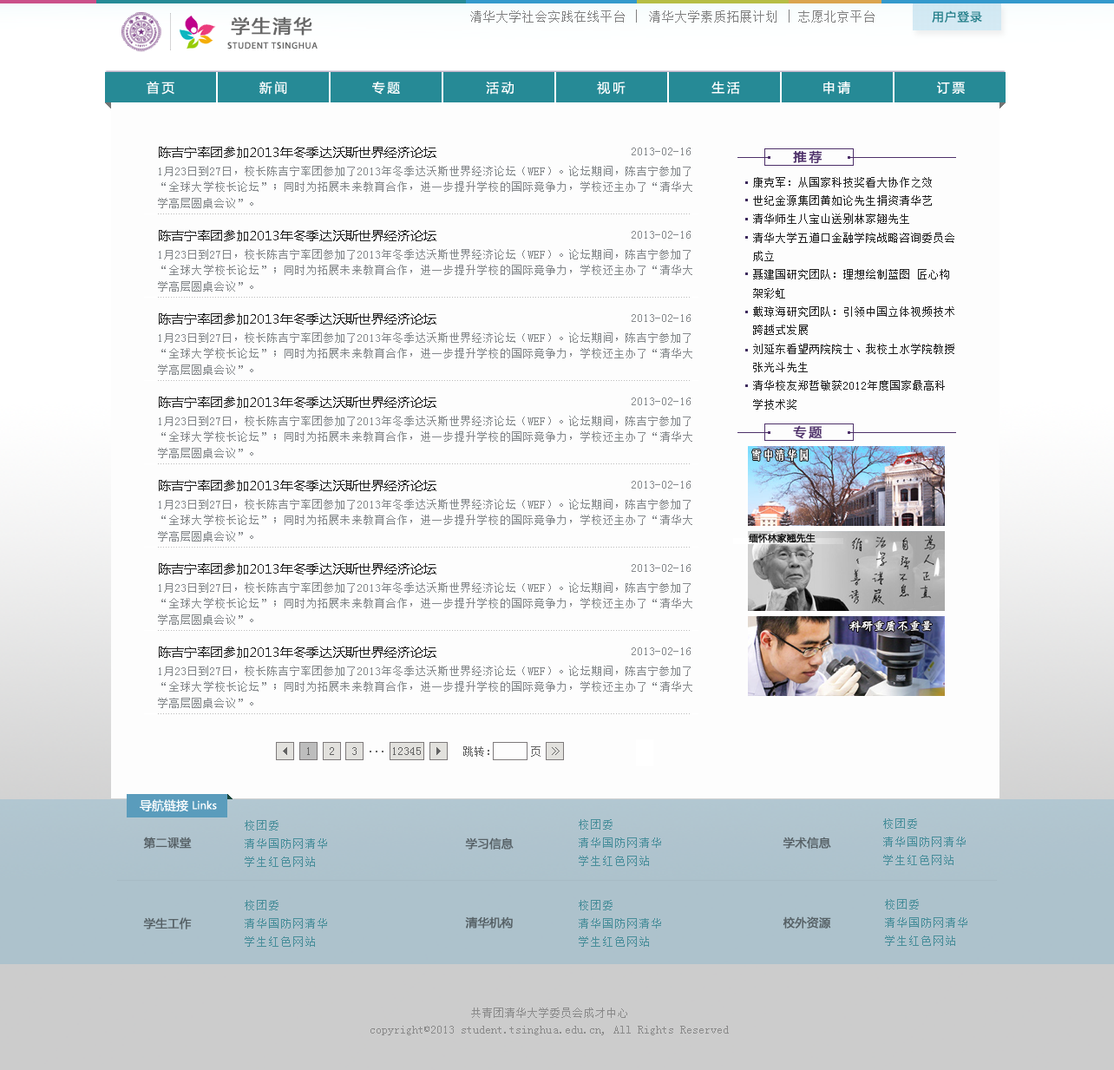
<style>
.page{position:relative;width:1114px;height:1070px;background:#fdfdfd}
.page>*{position:absolute;margin:0}
.t1{font:18.5px "MicrosoftYaHei";letter-spacing:0.1em;color:#666666;font-weight:bold}
.t2{font:12.2px "SimSun";letter-spacing:0.075em;color:#808080}
.t3{font:12.7px "SimSun";letter-spacing:0.075em;color:#808080}
.t4{font:11.6px "MicrosoftYaHei";letter-spacing:0.1em;color:#237e89}
.t5{font:9.3px "MyriadPro-Regular";letter-spacing:0.075em;color:#666666}
.t6{font:12.7px "MicrosoftYaHei";letter-spacing:0.2em;color:#ffffff}
.t7{font:12.7px "MicrosoftYaHei";color:#212121}
.t8{font:11.6px "SimSun";color:#84888b}
.t9{font:12.7px "MicrosoftYaHei";letter-spacing:0.2em;color:#4d3069;font-weight:bold}
.t10{font:11.6px/16.2px "SimSun";color:#84888b}
.t11{font:11.6px/18.5px "SimSun";color:#202020}
.t12{font:11.6px "FZYTK--GBK1-0";color:#ffffff;font-weight:bold}
.t13{font:9.3px "MicrosoftYaHei";color:#000000;font-weight:bold}
.t14{font:11.6px "STKaiti";color:#ffffff;font-weight:bold}
.t15{font:11.6px "SimSun";color:#636363}
.t16{font:10.4px "MicrosoftYaHei";color:#ffffff}
.t17{font:12.2px "MicrosoftYaHei";color:#ffffff}
.t18{font:11.6px/18.5px "SimSun";letter-spacing:0.075em;color:#478d9a}
.t19{font:11.6px "MicrosoftYaHei";color:#576167;font-weight:bold}
.t20{font:11.6px/18.5px "SimSun";letter-spacing:0.075em;color:#478d99}
.t21{font:11.6px "MicrosoftYaHei";color:#566166;font-weight:bold}
.t22{font:11.6px/16.2px "SimSun";color:#8a8a8a}
</style>
<div class="page">
<p class="t1" style="left:231px;top:16px;width:81px;height:20px">学生清华</p>
<p class="t2" style="left:470px;top:10px;width:405px;height:13px">清华大学社会实践在线平台 <span class="t3">| </span>清华大学素质拓展计划 <span class="t3">| </span>志愿北京平台</p>
<p class="t4" style="left:932px;top:10px;width:50px;height:13px">用户登录</p>
<p class="t5" style="left:227px;top:42px;width:91px;height:7px">STUDENT TSINGHUA</p>
<p class="t6" style="left:147px;top:81px;width:27px;height:14px">首页</p>
<p class="t6" style="left:259px;top:81px;width:28px;height:14px">新闻</p>
<p class="t6" style="left:372px;top:82px;width:28px;height:13px">专题</p>
<p class="t6" style="left:486px;top:82px;width:28px;height:13px">活动</p>
<p class="t6" style="left:597px;top:82px;width:29px;height:13px">视听</p>
<p class="t6" style="left:712px;top:81px;width:28px;height:14px">生活</p>
<p class="t6" style="left:824px;top:81px;width:27px;height:14px">申请</p>
<p class="t6" style="left:937px;top:82px;width:28px;height:12px">订票</p>
<p class="t7" style="left:159px;top:147px;width:278px;height:11px">陈吉宁率团参加2013年冬季达沃斯世界经济论坛</p>
<p class="t8" style="left:632px;top:148px;width:59px;height:7px">2013-02-16</p>
<p class="t9" style="left:793px;top:150px;width:30px;height:14px">推荐</p>
<p class="t10" style="left:158px;top:166px;width:535px;height:42px;text-align:justify">1月23日到27日，校长陈吉宁率团参加了2013年冬季达沃斯世界经济论坛（WEF）。论坛期间，陈吉宁参加了“全球大学校长论坛”；同时为拓展未来教育合作，进一步提升学校的国际竞争力，学校还主办了“清华大学高层圆桌会议”。</p>
<p class="t11" style="left:753px;top:177px;width:202px;height:233px">康克军：从国家科技奖看大协作之效<br>世纪金源集团黄如论先生捐资清华艺<br>清华师生八宝山送别林家翘先生<br>清华大学五道口金融学院战略咨询委员会成立<br>聂建国研究团队：理想绘制蓝图 匠心构架彩虹<br>戴琼海研究团队：引领中国立体视频技术跨越式发展<br>刘延东看望两院院士、我校土水学院教授张光斗先生<br>清华校友郑哲敏获2012年度国家最高科学技术奖<br>清华同时获2项2012年度国家技术发明奖一等奖<br>布赖恩·科比尔卡：选择挑战 永不放弃</p>
<p class="t7" style="left:159px;top:230px;width:278px;height:11px">陈吉宁率团参加2013年冬季达沃斯世界经济论坛</p>
<p class="t8" style="left:632px;top:231px;width:59px;height:8px">2013-02-16</p>
<p class="t10" style="left:158px;top:249px;width:535px;height:43px;text-align:justify">1月23日到27日，校长陈吉宁率团参加了2013年冬季达沃斯世界经济论坛（WEF）。论坛期间，陈吉宁参加了“全球大学校长论坛”；同时为拓展未来教育合作，进一步提升学校的国际竞争力，学校还主办了“清华大学高层圆桌会议”。</p>
<p class="t7" style="left:159px;top:313px;width:278px;height:12px">陈吉宁率团参加2013年冬季达沃斯世界经济论坛</p>
<p class="t8" style="left:632px;top:314px;width:59px;height:8px">2013-02-16</p>
<p class="t10" style="left:158px;top:332px;width:535px;height:43px;text-align:justify">1月23日到27日，校长陈吉宁率团参加了2013年冬季达沃斯世界经济论坛（WEF）。论坛期间，陈吉宁参加了“全球大学校长论坛”；同时为拓展未来教育合作，进一步提升学校的国际竞争力，学校还主办了“清华大学高层圆桌会议”。</p>
<p class="t7" style="left:159px;top:397px;width:278px;height:11px">陈吉宁率团参加2013年冬季达沃斯世界经济论坛</p>
<p class="t8" style="left:632px;top:397px;width:59px;height:8px">2013-02-16</p>
<p class="t10" style="left:158px;top:416px;width:535px;height:42px;text-align:justify">1月23日到27日，校长陈吉宁率团参加了2013年冬季达沃斯世界经济论坛（WEF）。论坛期间，陈吉宁参加了“全球大学校长论坛”；同时为拓展未来教育合作，进一步提升学校的国际竞争力，学校还主办了“清华大学高层圆桌会议”。</p>
<p class="t9" style="left:793px;top:425px;width:30px;height:14px">专题</p>
<p class="t12" style="left:752px;top:449px;width:57px;height:13px">雪中清华园</p>
<p class="t7" style="left:159px;top:480px;width:278px;height:11px">陈吉宁率团参加2013年冬季达沃斯世界经济论坛</p>
<p class="t8" style="left:632px;top:481px;width:59px;height:8px">2013-02-16</p>
<p class="t10" style="left:158px;top:499px;width:535px;height:43px;text-align:justify">1月23日到27日，校长陈吉宁率团参加了2013年冬季达沃斯世界经济论坛（WEF）。论坛期间，陈吉宁参加了“全球大学校长论坛”；同时为拓展未来教育合作，进一步提升学校的国际竞争力，学校还主办了“清华大学高层圆桌会议”。</p>
<p class="t13" style="left:749px;top:533px;width:67px;height:10px">缅怀林家翘先生</p>
<p class="t7" style="left:159px;top:563px;width:278px;height:12px">陈吉宁率团参加2013年冬季达沃斯世界经济论坛</p>
<p class="t8" style="left:632px;top:564px;width:59px;height:8px">2013-02-16</p>
<p class="t10" style="left:158px;top:582px;width:535px;height:43px;text-align:justify">1月23日到27日，校长陈吉宁率团参加了2013年冬季达沃斯世界经济论坛（WEF）。论坛期间，陈吉宁参加了“全球大学校长论坛”；同时为拓展未来教育合作，进一步提升学校的国际竞争力，学校还主办了“清华大学高层圆桌会议”。</p>
<p class="t14" style="left:850px;top:621px;width:83px;height:11px">科研重质不重量</p>
<p class="t7" style="left:159px;top:647px;width:278px;height:11px">陈吉宁率团参加2013年冬季达沃斯世界经济论坛</p>
<p class="t8" style="left:632px;top:647px;width:59px;height:8px">2013-02-16</p>
<p class="t10" style="left:158px;top:666px;width:535px;height:42px;text-align:justify">1月23日到27日，校长陈吉宁率团参加了2013年冬季达沃斯世界经济论坛（WEF）。论坛期间，陈吉宁参加了“全球大学校长论坛”；同时为拓展未来教育合作，进一步提升学校的国际竞争力，学校还主办了“清华大学高层圆桌会议”。</p>
<p class="t15" style="left:307px;top:747px;width:3px;height:8px">1</p>
<p class="t15" style="left:330px;top:747px;width:4px;height:8px">2</p>
<p class="t15" style="left:352px;top:747px;width:5px;height:8px">3</p>
<p class="t15" style="left:393px;top:747px;width:28px;height:8px">12345</p>
<p class="t15" style="left:463px;top:746px;width:26px;height:11px">跳转：</p>
<p class="t15" style="left:531px;top:746px;width:10px;height:11px">页</p>
<p class="t15" style="left:370px;top:751px;width:14px;height:1px">...</p>
<p class="t16" style="left:140px;top:799px;width:77px;height:13px"><span class="t17">导航链接 </span>Links</p>
<p class="t18" style="left:245px;top:820px;width:82px;height:47px">校团委<br>清华国防网清华<br>学生红色网站</p>
<p class="t18" style="left:579px;top:819px;width:82px;height:47px">校团委<br>清华国防网清华<br>学生红色网站</p>
<p class="t18" style="left:883px;top:818px;width:83px;height:47px">校团委<br>清华国防网清华<br>学生红色网站</p>
<p class="t19" style="left:143px;top:837px;width:49px;height:12px">第二课堂</p>
<p class="t19" style="left:465px;top:837px;width:49px;height:13px">学习信息</p>
<p class="t19" style="left:783px;top:837px;width:48px;height:12px">学术信息</p>
<p class="t20" style="left:245px;top:900px;width:82px;height:47px">校团委<br>清华国防网清华<br>学生红色网站</p>
<p class="t20" style="left:579px;top:900px;width:82px;height:47px">校团委<br>清华国防网清华<br>学生红色网站</p>
<p class="t20" style="left:885px;top:899px;width:83px;height:47px">校团委<br>清华国防网清华<br>学生红色网站</p>
<p class="t21" style="left:143px;top:917px;width:49px;height:12px">学生工作</p>
<p class="t21" style="left:465px;top:916px;width:48px;height:13px">清华机构</p>
<p class="t21" style="left:783px;top:916px;width:48px;height:13px">校外资源</p>
<p class="t22" style="left:371px;top:1008px;width:358px;height:27px;text-align:center">共青团清华大学委员会成才中心<br>copyright©2013 student.tsinghua.edu.cn, All Rights Reserved</p>
</div>
